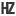
<style>
.page{position:relative;width:16px;height:16px;background:#ffffff}
.page>*{position:absolute;margin:0}
.t1{font:16.5px "HelveticaNeue-CondensedBold";letter-spacing:-0.075em;color:#333333;scale:0.91 1}
</style>
<div class="page">
<p class="t1" style="left:1px;top:2px;width:14px;height:12px">HZ</p>
</div>
